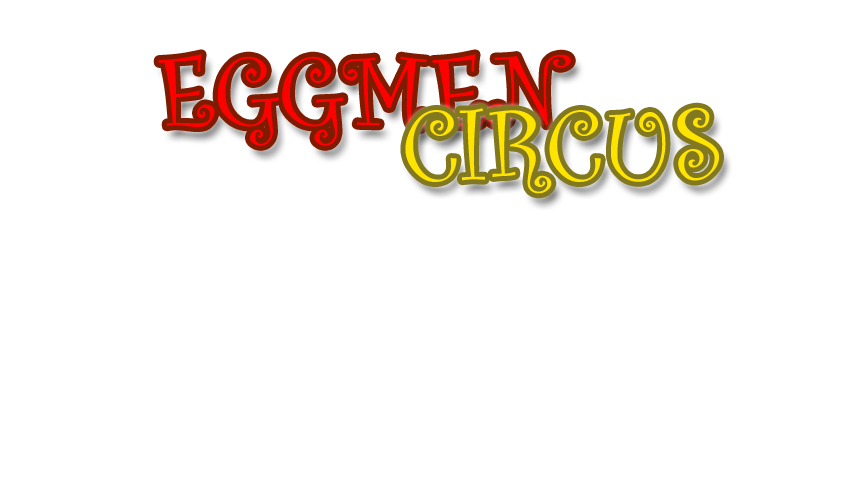
<style>
.page{position:relative;width:864px;height:480px;background:#ffffff}
.page>*{position:absolute;margin:0}
.t1{font:106px "CurlzMT";color:#ff0000}
.t2{font:106px "CurlzMT";color:#ffe400}
</style>
<div class="page">
<p class="t1" style="left:158px;top:54px;width:413px;height:92px">EGGMEN</p>
<p class="t2" style="left:405px;top:107px;width:314px;height:87px">CIRCUS</p>
</div>
